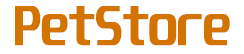
<style>
.page{position:relative;width:244px;height:54px;background:#ffffff}
.page>*{position:absolute;margin:0}
.t1{font:48px "Unispace-Bold";letter-spacing:-0.075em;color:#d37400;font-weight:bold}
</style>
<div class="page">
<p class="t1" style="left:15px;top:6px;width:215px;height:40px">PetStore</p>
</div>
